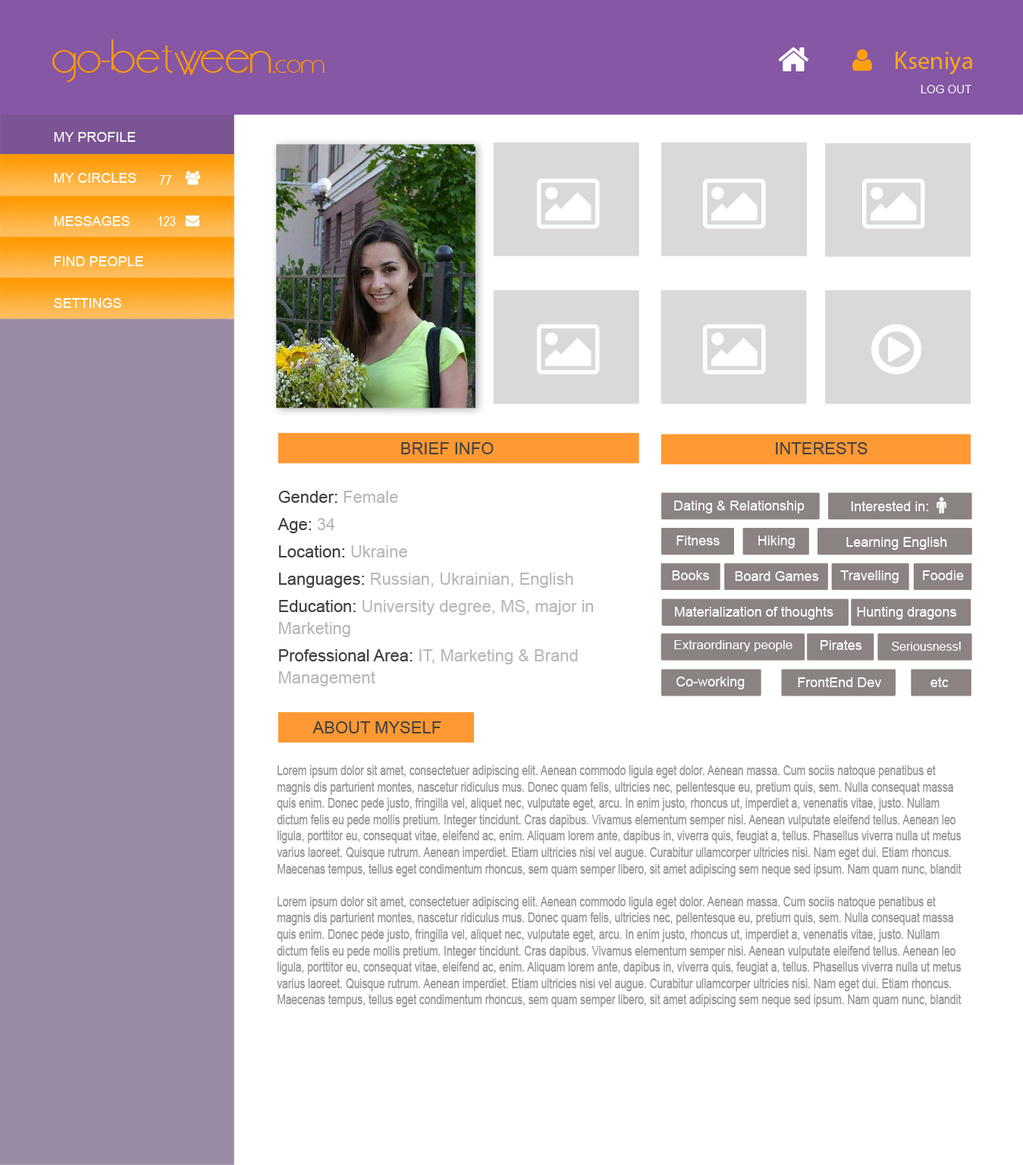
<style>
.page{position:relative;width:1023px;height:1165px;background:#ffffff}
.page>*{position:absolute;margin:0}
.t1{font:41.7px "DSStandartCyr";color:#ff9900}
.t2{font:24.3px "DSStandartCyr";color:#ff9900}
.t3{font:25px "MyriadPro-Regular";color:#faa521}
.t4{font:11.4px "ArialMT";color:#ffffff}
.t5{font:13.7px "ArialMT";color:#ffffff}
.t6{font:13.7px "ArialNarrow";color:#ffffff}
.t7{font:16.7px "ArialMT";color:#444141}
.t8{font:16.7px/21.8px "ArialMT";color:#b7b7b7}
.t9{font:16.7px/27.3px "ArialMT";color:#3f3d3d}
.t10{font:16.7px/27.3px "ArialMT";color:#b7b7b7}
.t11{font:16.7px/19.7px "ArialMT";color:#b7b7b7}
.t12{font:12.9px "ArialMT";color:#ffffff}
.t13{font:12.1px "ArialMT";color:#ffffff}
.t14{font:13.7px "ArialMT";color:#999999;scale:0.77 1}
</style>
<div class="page">
<p class="t1" style="left:52px;top:39px;width:273px;height:43px">go-between.<span class="t2">com</span></p>
<p class="t3" style="left:896px;top:52px;width:77px;height:23px">Kseniya</p>
<p class="t4" style="left:921px;top:85px;width:51px;height:8px">LOG OUT</p>
<p class="t5" style="left:54px;top:132px;width:82px;height:10px">MY PROFILE</p>
<p class="t5" style="left:54px;top:173px;width:83px;height:10px">MY CIRCLES</p>
<p class="t6" style="left:159px;top:175px;width:12px;height:10px">77</p>
<p class="t5" style="left:54px;top:216px;width:76px;height:10px">MESSAGES</p>
<p class="t6" style="left:158px;top:216px;width:18px;height:10px">123</p>
<p class="t5" style="left:54px;top:256px;width:89px;height:10px">FIND PEOPLE</p>
<p class="t5" style="left:54px;top:298px;width:67px;height:10px">SETTINGS</p>
<p class="t7" style="left:401px;top:442px;width:93px;height:12px">BRIEF INFO</p>
<p class="t7" style="left:776px;top:442px;width:92px;height:12px">INTERESTS</p>
<p class="t8" style="left:278px;top:491px;width:316px;height:196px"><span class="t9">Gender: </span><span class="t10">Female<br></span><span class="t9">Age: </span><span class="t10">34<br></span><span class="t9">Location: </span><span class="t10">Ukraine<br></span><span class="t9">Languages: </span><span class="t10">Russian, Ukrainian, </span><span class="t11">English<br></span><span class="t9">Education: </span>University degree, MS, major in                       Marketing<br><span class="t9">Professional Area: </span>IT, Marketing &amp; Brand   Management</p>
<p class="t5" style="left:674px;top:501px;width:131px;height:13px">Dating &amp; Relationship</p>
<p class="t5" style="left:677px;top:536px;width:43px;height:9px">Fitness</p>
<p class="t5" style="left:759px;top:536px;width:36px;height:12px">Hiking</p>
<p class="t5" style="left:847px;top:537px;width:100px;height:13px">Learning English</p>
<p class="t5" style="left:672px;top:570px;width:37px;height:10px">Books</p>
<p class="t5" style="left:735px;top:571px;width:84px;height:10px">Board Games</p>
<p class="t5" style="left:841px;top:570px;width:58px;height:13px">Travelling</p>
<p class="t5" style="left:923px;top:570px;width:41px;height:10px">Foodie</p>
<p class="t5" style="left:675px;top:607px;width:159px;height:13px">Materialization of thoughts</p>
<p class="t5" style="left:857px;top:607px;width:100px;height:13px">Hunting dragons</p>
<p class="t12" style="left:674px;top:640px;width:119px;height:12px">Extraordinary people</p>
<p class="t5" style="left:821px;top:640px;width:42px;height:10px">Pirates</p>
<p class="t13" style="left:892px;top:642px;width:69px;height:9px">Seriousness!</p>
<p class="t5" style="left:677px;top:677px;width:68px;height:13px">Co-working</p>
<p class="t5" style="left:798px;top:677px;width:83px;height:10px">FrontEnd Dev</p>
<p class="t5" style="left:931px;top:677px;width:18px;height:10px">etc</p>
<p class="t7" style="left:313px;top:721px;width:129px;height:13px">ABOUT MYSELF</p>
<p class="t14" style="left:277px;top:765px;width:685px;height:242px">Lorem ipsum dolor sit amet, consectetuer adipiscing elit. Aenean commodo ligula eget dolor. Aenean massa. Cum sociis natoque penatibus et magnis dis parturient montes, nascetur ridiculus mus. Donec quam felis, ultricies nec, pellentesque eu, pretium quis, sem. Nulla consequat massa quis enim. Donec pede justo, fringilla vel, aliquet nec, vulputate eget, arcu. In enim justo, rhoncus ut, imperdiet a, venenatis vitae, justo. Nullam dictum felis eu pede mollis pretium. Integer tincidunt. Cras dapibus. Vivamus elementum semper nisi. Aenean vulputate eleifend tellus. Aenean leo ligula, porttitor eu, consequat vitae, eleifend ac, enim. Aliquam lorem ante, dapibus in, viverra quis, feugiat a, tellus. Phasellus viverra nulla ut metus varius laoreet. Quisque rutrum. Aenean imperdiet. Etiam ultricies nisi vel augue. Curabitur ullamcorper ultricies nisi. Nam eget dui. Etiam rhoncus. Maecenas tempus, tellus eget condimentum rhoncus, sem quam semper libero, sit amet adipiscing sem neque sed ipsum. Nam quam nunc, blandit<br><br>Lorem ipsum dolor sit amet, consectetuer adipiscing elit. Aenean commodo ligula eget dolor. Aenean massa. Cum sociis natoque penatibus et magnis dis parturient montes, nascetur ridiculus mus. Donec quam felis, ultricies nec, pellentesque eu, pretium quis, sem. Nulla consequat massa quis enim. Donec pede justo, fringilla vel, aliquet nec, vulputate eget, arcu. In enim justo, rhoncus ut, imperdiet a, venenatis vitae, justo. Nullam dictum felis eu pede mollis pretium. Integer tincidunt. Cras dapibus. Vivamus elementum semper nisi. Aenean vulputate eleifend tellus. Aenean leo ligula, porttitor eu, consequat vitae, eleifend ac, enim. Aliquam lorem ante, dapibus in, viverra quis, feugiat a, tellus. Phasellus viverra nulla ut metus varius laoreet. Quisque rutrum. Aenean imperdiet. Etiam ultricies nisi vel augue. Curabitur ullamcorper ultricies nisi. Nam eget dui. Etiam rhoncus. Maecenas tempus, tellus eget condimentum rhoncus, sem quam semper libero, sit amet adipiscing sem neque sed ipsum. Nam quam nunc, blandit</p>
</div>
